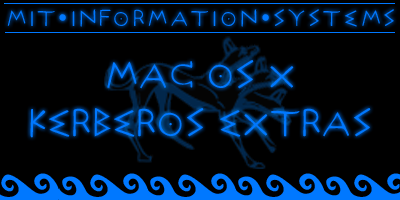
<style>
.page{position:relative;width:400px;height:200px;background:#000000}
.page>*{position:absolute;margin:0}
.t1{font:24px "P22AcropolisNow";letter-spacing:0.1em;color:#0078ff}
.t2{font:40px "P22AcropolisNow";color:#0078ff}
</style>
<div class="page">
<p class="t1" style="left:7px;top:9px;width:387px;height:18px">MIT•INFORMATION•SYSTEMS</p>
<p class="t2" style="left:30px;top:60px;width:341px;height:78px;text-align:center">MAC OS X<br>KERBEROS EXTRAS</p>
</div>
